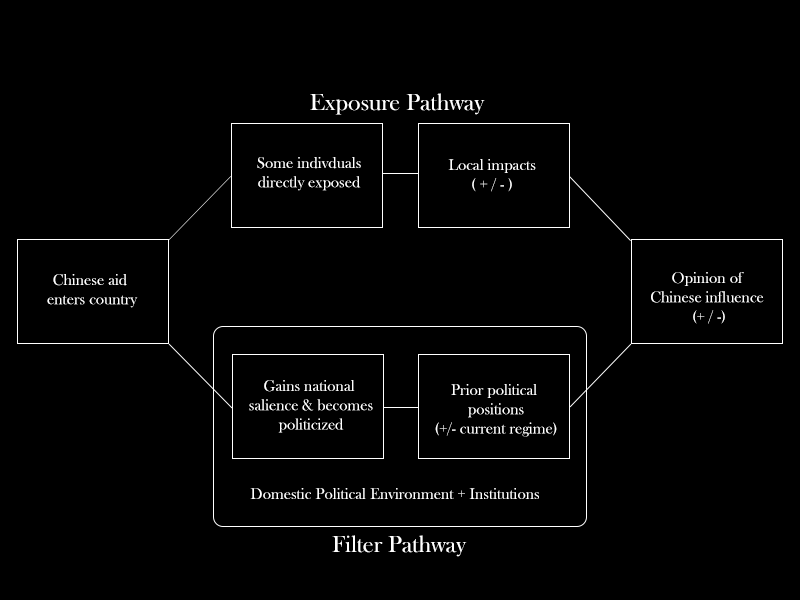
<style>
.page{position:relative;width:800px;height:600px;background:#000000}
.page>*{position:absolute;margin:0}
.t1{font:24px "BaskOldFace";color:#ffffff}
.t2{font:16px "BaskOldFace";color:#ffffff}
</style>
<div class="page">
<p class="t1" style="left:310px;top:93px;width:175px;height:22px">Exposure Pathway</p>
<p class="t2" style="left:257px;top:157px;width:104px;height:34px;text-align:center">Some indivduals<br>directly exposed</p>
<p class="t2" style="left:448px;top:159px;width:88px;height:33px;text-align:center">Local impacts<br>( + / - )</p>
<p class="t2" style="left:47px;top:274px;width:91px;height:34px;text-align:center">Chinese aid <br>enters country</p>
<p class="t2" style="left:651px;top:272px;width:113px;height:52px;text-align:center">Opinion of <br>Chinese influence <br>(+ / -)</p>
<p class="t2" style="left:249px;top:380px;width:124px;height:53px;text-align:center">Gains national <br>salience &amp; becomes<br>politicized</p>
<p class="t2" style="left:435px;top:384px;width:122px;height:53px;text-align:center">Prior political <br>positions<br>(+/- current regime)</p>
<p class="t2" style="left:250px;top:488px;width:289px;height:11px">Domestic Political Environment + Institutions</p>
<p class="t1" style="left:332px;top:535px;width:135px;height:22px">Filter Pathway</p>
</div>
